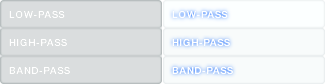
<style>
.page{position:relative;width:325px;height:84px;background:#daddde}
.page>*{position:absolute;margin:0}
.t1{font:10px "HelveticaNeue-Bold";letter-spacing:0.05em;color:#ffffff;text-transform:uppercase}
</style>
<div class="page">
<p class="t1" style="left:172px;top:10px;width:56px;height:9px">low-pass</p>
<p class="t1" style="left:172px;top:38px;width:58px;height:9px">high-pass</p>
<p class="t1" style="left:172px;top:66px;width:61px;height:9px">BAND-pass</p>
</div>
